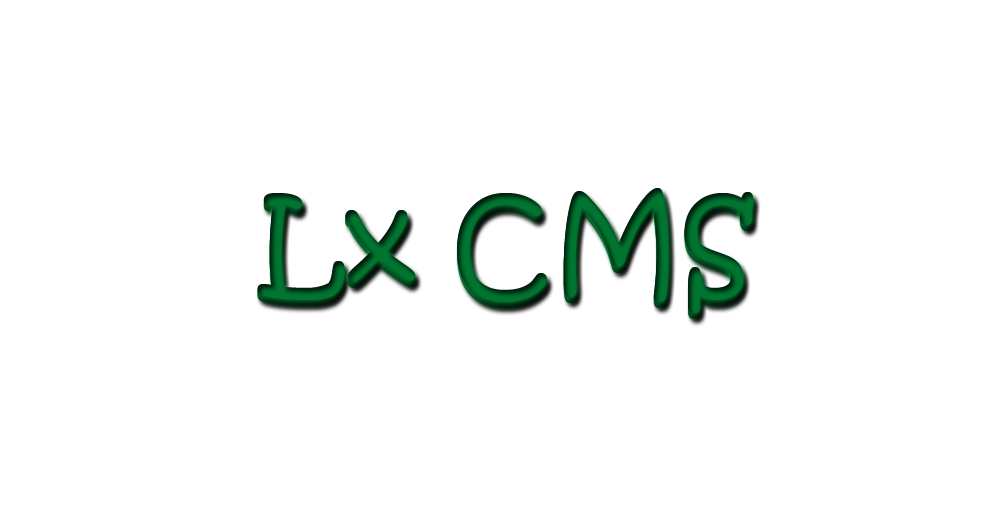
<style>
.page{position:relative;width:1000px;height:505px;background:#ffffff}
.page>*{position:absolute;margin:0}
.t1{font:120px "KristenITC-Regular";color:#007530}
</style>
<div class="page">
<p class="t1" style="left:257px;top:194px;width:497px;height:126px">Lx CMS</p>
<p class="t1" style="left:257px;top:192px;width:497px;height:126px">Lx CMS</p>
<p class="t1" style="left:257px;top:190px;width:497px;height:126px">Lx CMS</p>
<p class="t1" style="left:257px;top:188px;width:497px;height:126px">Lx CMS</p>
</div>
